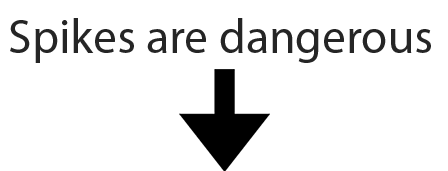
<style>
.page{position:relative;width:448px;height:171px;background:#ffffff}
.page>*{position:absolute;margin:0}
.t1{font:48px "MyriadPro-Regular";color:#252525}
</style>
<div class="page">
<p class="t1" style="left:10px;top:18px;width:421px;height:45px">Spikes are dangerous</p>
</div>
